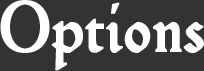
<style>
.page{position:relative;width:204px;height:71px;background:#333333}
.page>*{position:absolute;margin:0}
.t1{font:70.8px "Hamlet-Tertia18";color:#ffffff;font-weight:bold}
</style>
<div class="page">
<p class="t1" style="left:0px;top:0px;width:204px;height:71px">Options</p>
</div>
